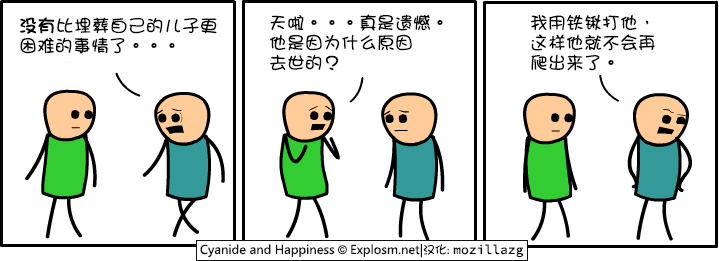
<style>
.page{position:relative;width:719px;height:261px;background:#ffffff}
.page>*{position:absolute;margin:0}
.t1{font:18px/20px "DFGirl";color:#000000}
.t2{font:18px/20px "DFGirl";color:#000000;font-weight:bold}
</style>
<div class="page">
<p class="t1" style="left:20px;top:17px;width:197px;height:37px"><span class="t2">没有</span>比埋葬自己的儿子更<br>困难的事情了。。。</p>
<p class="t1" style="left:270px;top:14px;width:173px;height:57px">天啦。。。真是遗憾。<br>他是因为什么原因<br>去世的？</p>
<p class="t1" style="left:530px;top:14px;width:125px;height:57px">我用铁锹打他，<br>这样他就不会再<br>爬出来了。</p>
</div>
